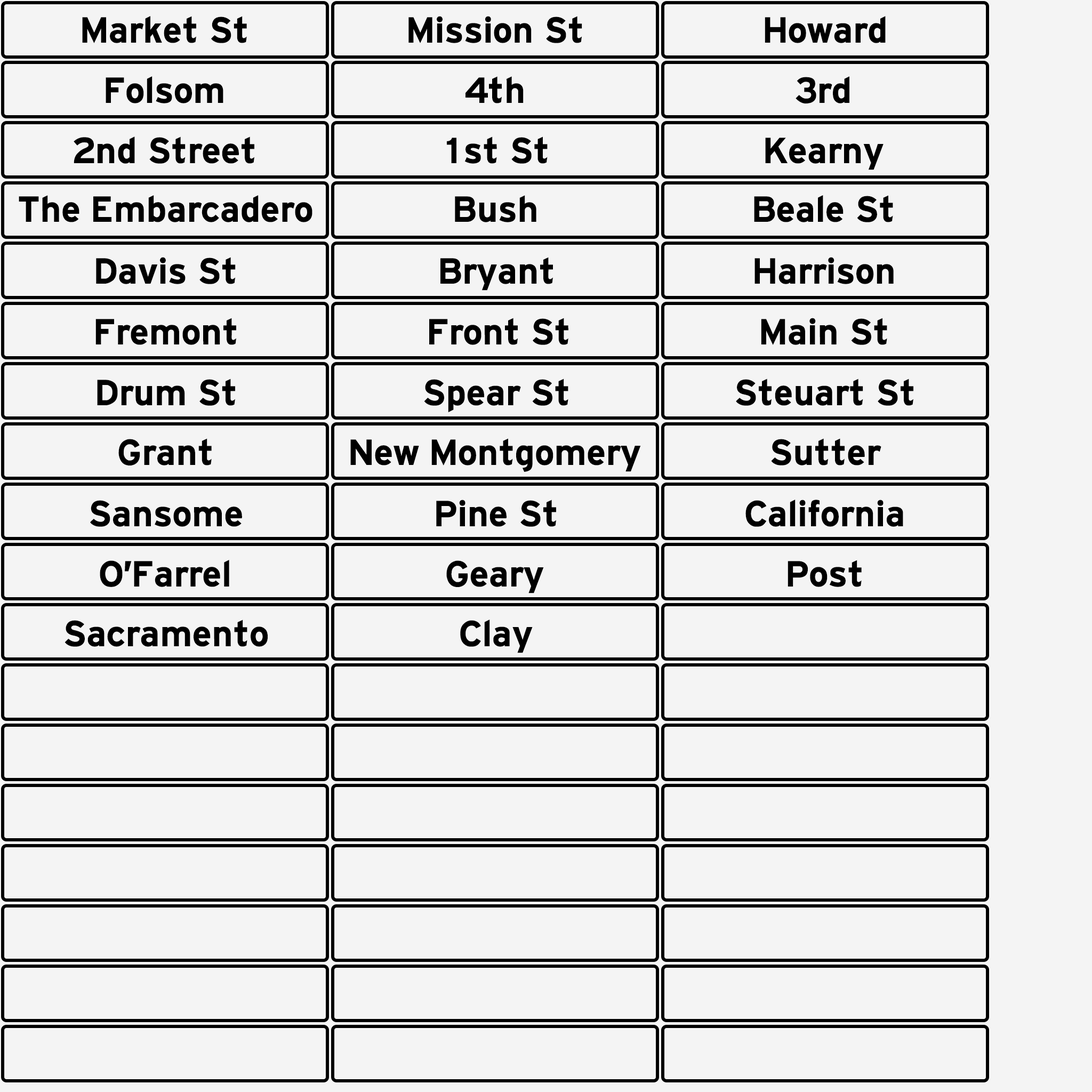
<style>
.page{position:relative;width:1092px;height:1092px;background:#f4f4f4}
.page>*{position:absolute;margin:0}
.t1{font:38.4px "HittheRoad";color:#000000}
.t2{font:38.4px "HittheRoad";color:#010101}
</style>
<div class="page">
<p class="t1" style="left:82px;top:16px;width:165px;height:27px">Market St</p>
<p class="t1" style="left:408px;top:16px;width:174px;height:27px">Mission St</p>
<p class="t1" style="left:765px;top:16px;width:121px;height:27px">Howard</p>
<p class="t2" style="left:106px;top:76px;width:117px;height:27px">Folsom</p>
<p class="t1" style="left:465px;top:76px;width:59px;height:27px">4th</p>
<p class="t1" style="left:796px;top:76px;width:53px;height:28px">3rd</p>
<p class="t2" style="left:74px;top:136px;width:180px;height:28px">2nd Street</p>
<p class="t1" style="left:447px;top:136px;width:101px;height:28px">1st St</p>
<p class="t1" style="left:765px;top:138px;width:119px;height:32px">Kearny</p>
<p class="t1" style="left:19px;top:195px;width:293px;height:27px">The Embarcadero</p>
<p class="t1" style="left:455px;top:195px;width:81px;height:27px">Bush</p>
<p class="t1" style="left:754px;top:195px;width:139px;height:27px">Beale St</p>
<p class="t1" style="left:96px;top:257px;width:140px;height:27px">Davis St</p>
<p class="t1" style="left:440px;top:257px;width:113px;height:34px">Bryant</p>
<p class="t1" style="left:754px;top:257px;width:140px;height:27px">Harrison</p>
<p class="t2" style="left:95px;top:318px;width:141px;height:27px">Fremont</p>
<p class="t1" style="left:429px;top:318px;width:139px;height:27px">Front St</p>
<p class="t2" style="left:761px;top:318px;width:126px;height:27px">Main St</p>
<p class="t1" style="left:97px;top:379px;width:138px;height:27px">Drum St</p>
<p class="t1" style="left:424px;top:379px;width:144px;height:34px">Spear St</p>
<p class="t1" style="left:736px;top:379px;width:177px;height:27px">Steuart St</p>
<p class="t1" style="left:118px;top:438px;width:94px;height:27px">Grant</p>
<p class="t1" style="left:350px;top:438px;width:291px;height:34px">New Montgomery</p>
<p class="t1" style="left:771px;top:438px;width:110px;height:27px">Sutter</p>
<p class="t1" style="left:90px;top:500px;width:152px;height:27px">Sansome</p>
<p class="t1" style="left:436px;top:500px;width:120px;height:27px">Pine St</p>
<p class="t1" style="left:745px;top:500px;width:158px;height:27px">California</p>
<p class="t1" style="left:100px;top:560px;width:129px;height:27px">O’Farrel</p>
<p class="t1" style="left:446px;top:560px;width:98px;height:33px">Geary</p>
<p class="t1" style="left:788px;top:560px;width:74px;height:27px">Post</p>
<p class="t1" style="left:65px;top:620px;width:203px;height:27px">Sacramento</p>
<p class="t1" style="left:460px;top:620px;width:73px;height:33px">Clay</p>
</div>
